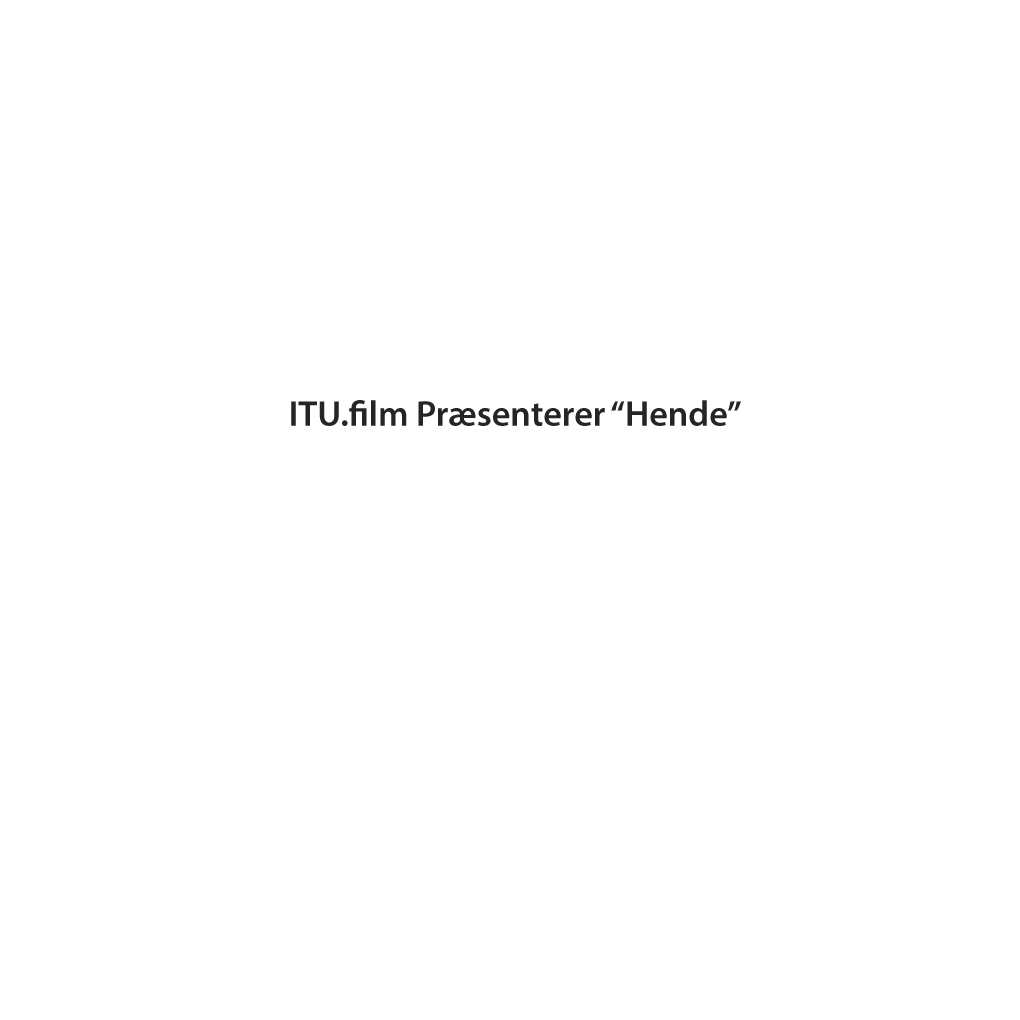
<style>
.page{position:relative;width:1020px;height:1020px;background:#ffffff}
.page>*{position:absolute;margin:0}
.t1{font:36px "MyriadPro-Semibold";color:#252525}
</style>
<div class="page">
<p class="t1" style="left:291px;top:400px;width:450px;height:26px">ITU.film Præsenterer “Hende”</p>
</div>
